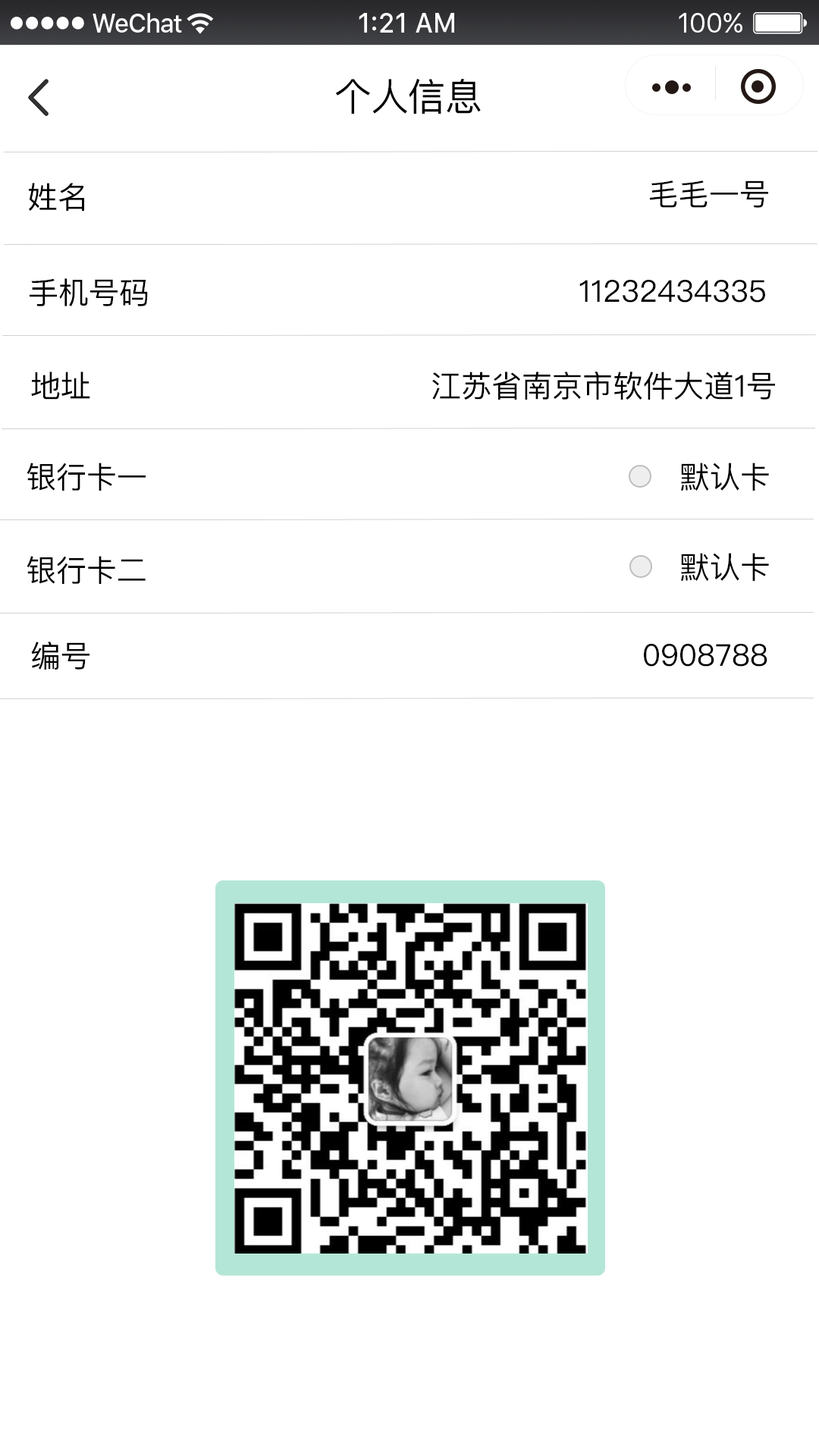
<style>
.page{position:relative;width:819px;height:1456px;background:#ffffff}
.page>*{position:absolute;margin:0}
.t1{font:37.9px "PingFangSC-Regular";color:#000000}
.t2{font:30.3px "PingFangSC-Regular";color:#000000}
</style>
<div class="page">
<p class="t1" style="left:335px;top:78px;width:146px;height:36px">个人信息</p>
<p class="t2" style="left:29px;top:183px;width:55px;height:29px">姓名</p>
<p class="t2" style="left:650px;top:180px;width:118px;height:28px">毛毛一号</p>
<p class="t2" style="left:30px;top:278px;width:118px;height:29px">手机号码</p>
<p class="t2" style="left:579px;top:280px;width:186px;height:23px">11232434335</p>
<p class="t2" style="left:31px;top:372px;width:59px;height:28px">地址</p>
<p class="t2" style="left:432px;top:372px;width:343px;height:28px">江苏省南京市软件大道1号</p>
<p class="t2" style="left:27px;top:463px;width:119px;height:28px">银行卡一</p>
<p class="t2" style="left:681px;top:463px;width:88px;height:28px">默认卡</p>
<p class="t2" style="left:27px;top:556px;width:119px;height:28px">银行卡二</p>
<p class="t2" style="left:681px;top:553px;width:88px;height:29px">默认卡</p>
<p class="t2" style="left:31px;top:642px;width:58px;height:28px">编号</p>
<p class="t2" style="left:644px;top:644px;width:123px;height:23px">0908788</p>
</div>
